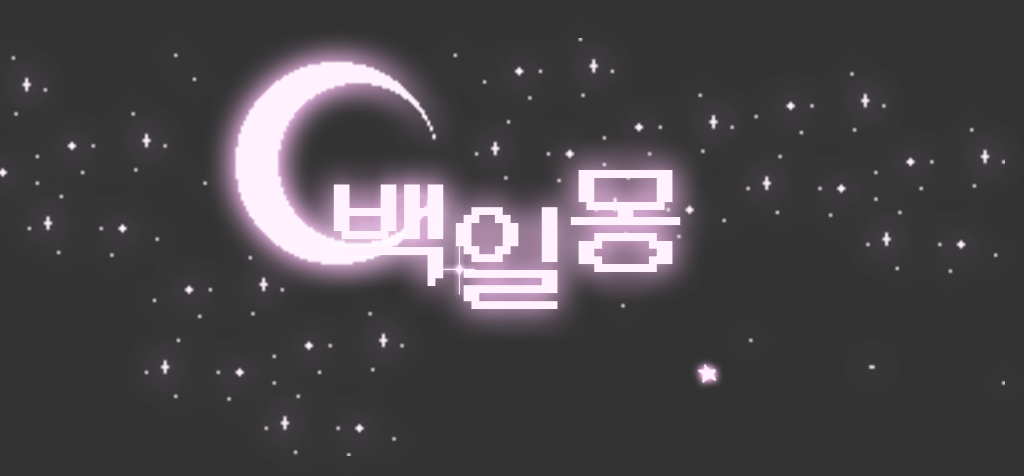
<style>
.page{position:relative;width:1024px;height:476px;background:#333333}
.page>*{position:absolute;margin:0}
.t1{font:125px "DungGeunMo";color:#ffffff}
</style>
<div class="page">
<p class="t1" style="left:570px;top:170px;width:111px;height:102px">몽</p>
<p class="t1" style="left:333px;top:184px;width:111px;height:102px">백</p>
<p class="t1" style="left:455px;top:207px;width:103px;height:102px">일</p>
</div>
